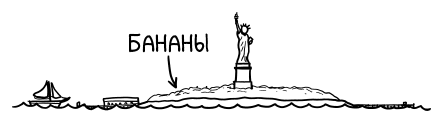
<style>
.page{position:relative;width:443px;height:123px;background:#ffffff}
.page>*{position:absolute;margin:0}
.t1{font:25px "SarcasmInk";color:#000000}
</style>
<div class="page">
<p class="t1" style="left:128px;top:33px;width:81px;height:20px">Бананы</p>
</div>
